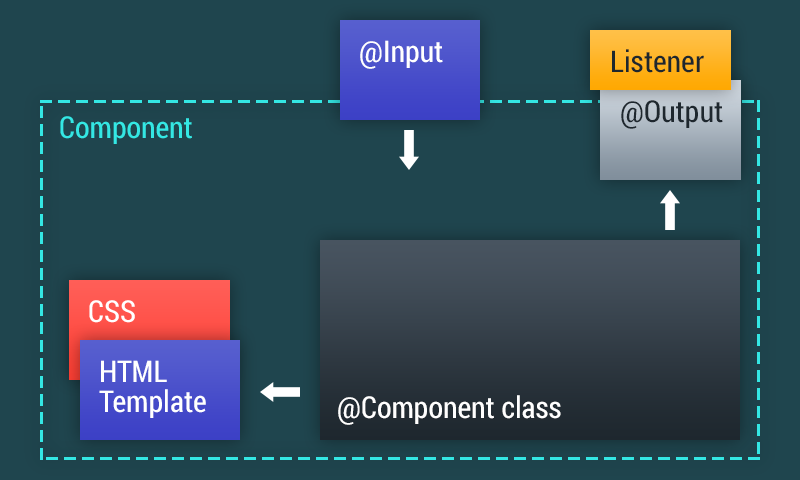
<style>
.page{position:relative;width:800px;height:480px;background:#1f454e}
.page>*{position:absolute;margin:0}
.t1{font:30px "RobotoCondensed-Regular";color:#ffffff}
.t2{font:30px "RobotoCondensed-Regular";color:#1e272e}
.t3{font:30px "RobotoCondensed-Regular";color:#34e7e4}
.t4{font:30px/20px "RobotoCondensed-Regular";color:#ffffff}
</style>
<div class="page">
<p class="t1" style="left:360px;top:40px;width:83px;height:29px">@Input</p>
<p class="t2" style="left:612px;top:49px;width:92px;height:24px">Listener</p>
<p class="t2" style="left:621px;top:100px;width:102px;height:29px">@Output</p>
<p class="t3" style="left:60px;top:116px;width:132px;height:28px">Component</p>
<p class="t1" style="left:89px;top:300px;width:46px;height:23px">CSS</p>
<p class="t4" style="left:99px;top:360px;width:107px;height:58px">HTML<br>Template</p>
<p class="t1" style="left:338px;top:395px;width:223px;height:30px">@Component class</p>
</div>
